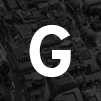
<style>
.page{position:relative;width:101px;height:101px}
.page>*{position:absolute;margin:0}
.t1{font:72px "Overpass-Bold";color:#ffffff}
</style>
<div class="page">
<p class="t1" style="left:29px;top:25px;width:42px;height:52px">G</p>
</div>
